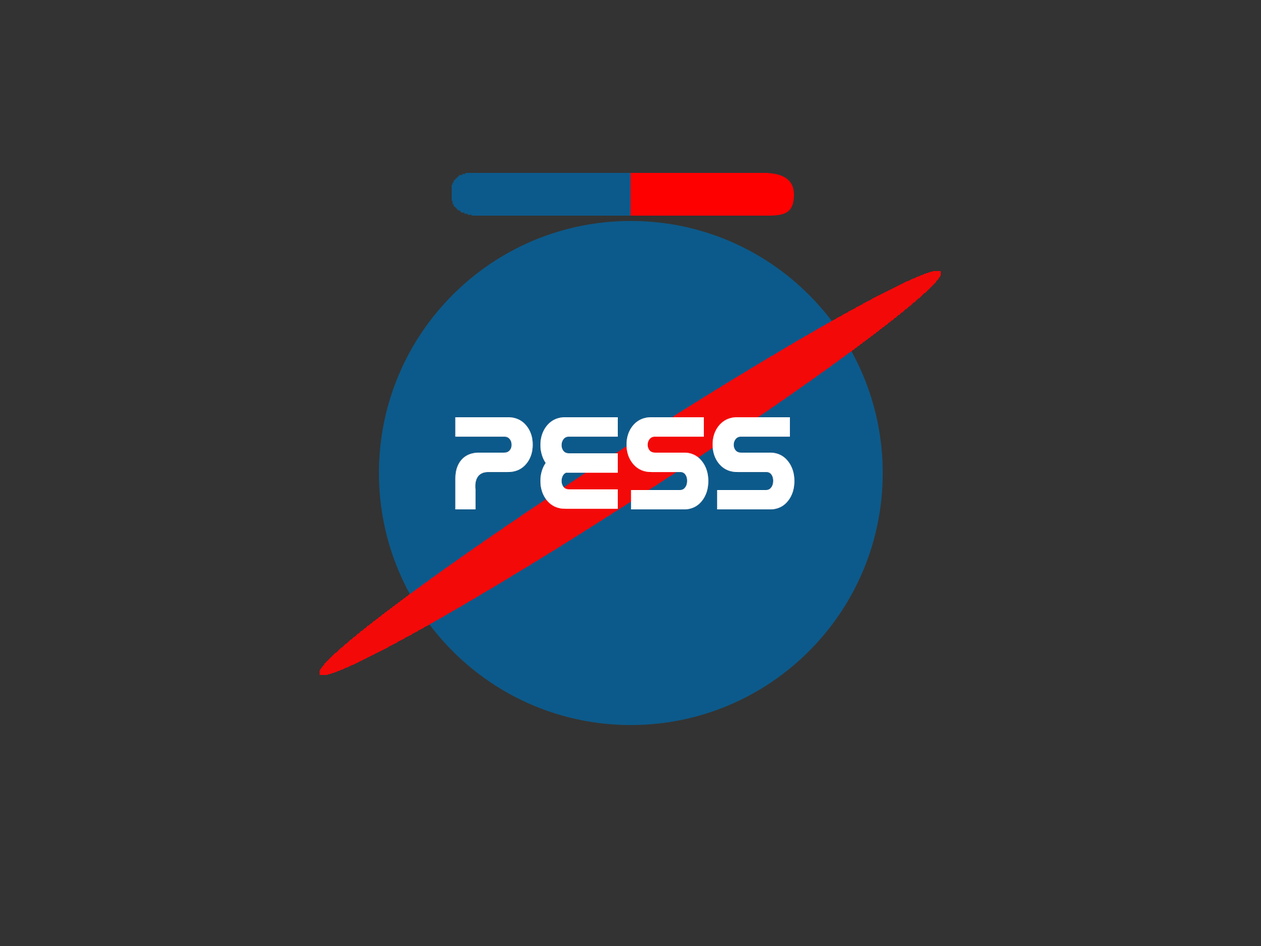
<style>
.page{position:relative;width:1261px;height:946px;background:#333333}
.page>*{position:absolute;margin:0}
.t1{font:139px "Nasalization";color:#ffffff}
</style>
<div class="page">
<p class="t1" style="left:455px;top:417px;width:340px;height:92px">PESS</p>
</div>
